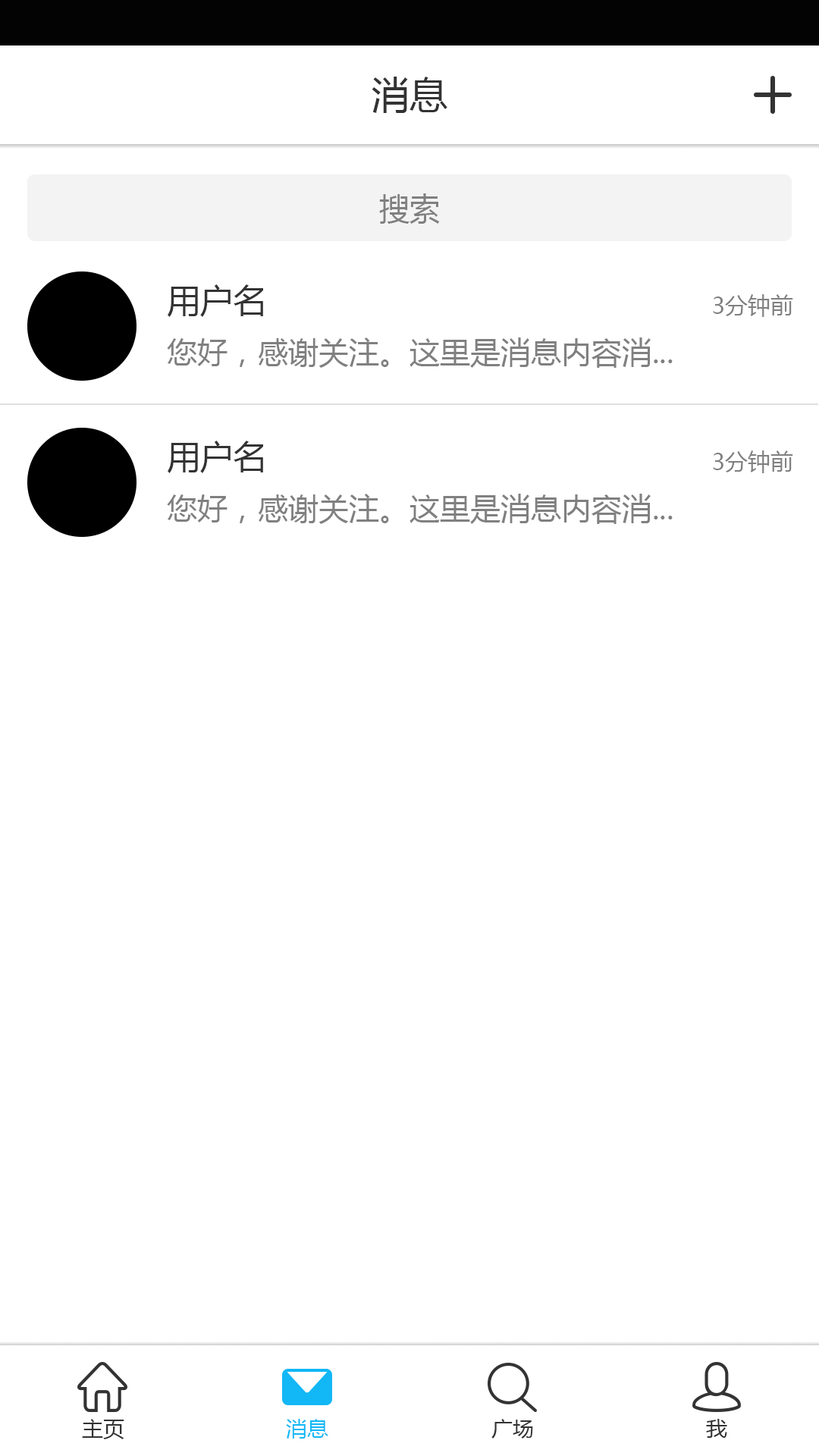
<style>
.page{position:relative;width:819px;height:1456px;background:#ffffff}
.page>*{position:absolute;margin:0}
.t1{font:37.9px "MicrosoftYaHei";color:#333333}
.t2{font:30.3px "MicrosoftYaHei";color:#808080}
.t3{font:33.4px "MicrosoftYaHei";color:#333333}
.t4{font:22.7px "MicrosoftYaHei";color:#808080}
.t5{font:21.2px "MicrosoftYaHei";color:#333333}
.t6{font:21.2px "MicrosoftYaHei";color:#12b7f5}
</style>
<div class="page">
<p class="t1" style="left:372px;top:77px;width:75px;height:36px">消息</p>
<p class="t2" style="left:379px;top:193px;width:61px;height:31px">搜索</p>
<p class="t3" style="left:168px;top:284px;width:95px;height:33px">用户名</p>
<p class="t4" style="left:713px;top:294px;width:80px;height:23px">3分钟前</p>
<p class="t2" style="left:167px;top:337px;width:506px;height:31px">您好，感谢关注。这里是消息内容消...</p>
<p class="t3" style="left:168px;top:441px;width:95px;height:32px">用户名</p>
<p class="t4" style="left:713px;top:450px;width:80px;height:23px">3分钟前</p>
<p class="t2" style="left:167px;top:494px;width:506px;height:30px">您好，感谢关注。这里是消息内容消...</p>
<p class="t5" style="left:82px;top:1419px;width:42px;height:20px">主页</p>
<p class="t6" style="left:286px;top:1419px;width:42px;height:20px">消息</p>
<p class="t5" style="left:491px;top:1419px;width:42px;height:20px">广场</p>
<p class="t5" style="left:706px;top:1419px;width:21px;height:19px">我</p>
</div>
